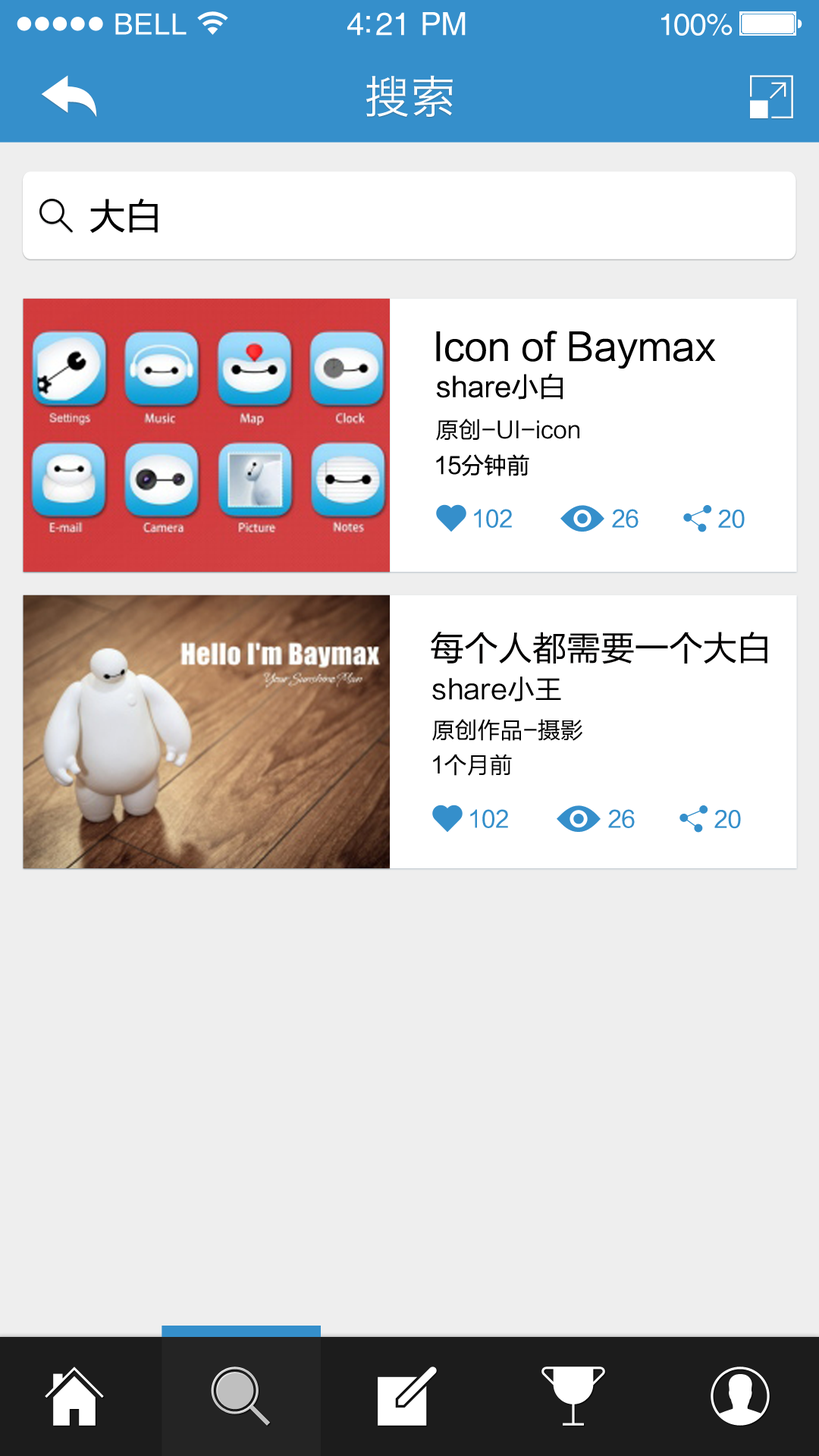
<style>
.page{position:relative;width:819px;height:1456px;background:#eeeeee}
.page>*{position:absolute;margin:0}
.t1{font:29.3px "Helvetica";letter-spacing:0.02em;color:#ffffff}
.t2{font:31.8px "Helvetica";letter-spacing:-0.02em;color:#ffffff}
.t3{font:30.6px "Helvetica";letter-spacing:-0.02em;color:#ffffff}
.t4{font:45.5px "HiraginoSansGB-W3";letter-spacing:0.025em;color:#ffffff}
.t5{font:36.4px "FZLTHJW--GB1-0";color:#000000}
.t6{font:37.9px "FZLTHJW--GB1-0";color:#000000}
.t7{font:27.3px "FZLTHJW--GB1-0";color:#000000}
.t8{font:22.7px "FZLTHJW--GB1-0";color:#000000}
.t9{font:22.7px "FZLTHJW--GB1-0";color:#358fcb}
.t10{font:34.1px "FZLTHJW--GB1-0";color:#010000}
</style>
<div class="page">
<p class="t1" style="left:115px;top:13px;width:72px;height:22px">BELL</p>
<p class="t2" style="left:347px;top:12px;width:119px;height:24px">4:21 PM</p>
<p class="t3" style="left:661px;top:14px;width:72px;height:22px">100%</p>
<p class="t4" style="left:366px;top:75px;width:87px;height:42px">搜索</p>
<p class="t5" style="left:90px;top:199px;width:68px;height:34px">大白</p>
<p class="t6" style="left:436px;top:331px;width:280px;height:38px">Icon of Baymax</p>
<p class="t7" style="left:436px;top:373px;width:127px;height:27px">share小白</p>
<p class="t8" style="left:436px;top:419px;width:143px;height:22px">原创-UI-icon</p>
<p class="t8" style="left:436px;top:454px;width:93px;height:22px">15分钟前</p>
<p class="t9" style="left:474px;top:509px;width:38px;height:19px">102</p>
<p class="t9" style="left:612px;top:509px;width:27px;height:19px">26</p>
<p class="t9" style="left:718px;top:510px;width:27px;height:19px">20</p>
<p class="t10" style="left:431px;top:632px;width:336px;height:32px">每个人都需要一个大白</p>
<p class="t7" style="left:432px;top:676px;width:129px;height:25px">share小王</p>
<p class="t8" style="left:432px;top:719px;width:150px;height:22px">原创作品-摄影</p>
<p class="t8" style="left:433px;top:754px;width:79px;height:22px">1个月前</p>
<p class="t9" style="left:470px;top:809px;width:38px;height:19px">102</p>
<p class="t9" style="left:608px;top:809px;width:27px;height:19px">26</p>
<p class="t9" style="left:714px;top:810px;width:27px;height:19px">20</p>
</div>
